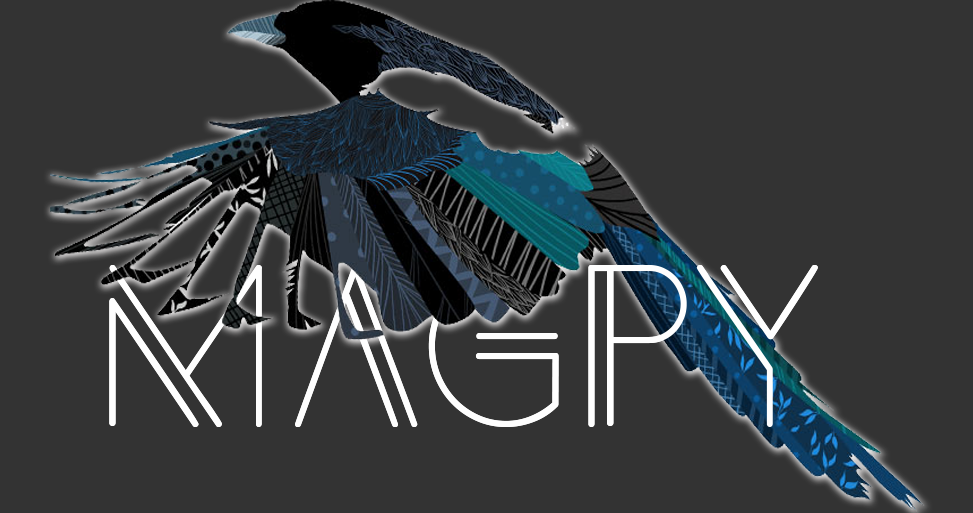
<style>
.page{position:relative;width:973px;height:513px;background:#333333}
.page>*{position:absolute;margin:0}
.t1{font:202.8px "Anders";color:#fefefe;scale:0.95 1}
</style>
<div class="page">
<p class="t1" style="left:109px;top:265px;width:709px;height:162px">MagPY</p>
</div>
